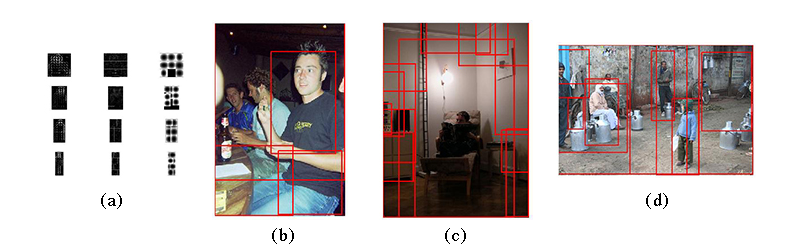
<style>
.page{position:relative;width:800px;height:250px;background:#ffffff}
.page>*{position:absolute;margin:0}
.t1{font:18px "Times-Roman";letter-spacing:0.06em;color:#000000}
</style>
<div class="page">
<p class="t1" style="left:101px;top:193px;width:21px;height:16px">(a)</p>
<p class="t1" style="left:646px;top:193px;width:22px;height:16px">(d)</p>
<p class="t1" style="left:272px;top:228px;width:22px;height:16px">(b)</p>
<p class="t1" style="left:445px;top:228px;width:21px;height:16px">(c)</p>
</div>
